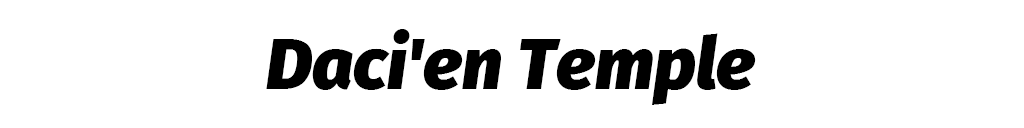
<style>
.page{position:relative;width:1024px;height:128px;background:#ffffff}
.page>*{position:absolute;margin:0}
.t1{font:71.8px "FiraSans-BlackItalic";color:#000000}
</style>
<div class="page">
<p class="t1" style="left:266px;top:29px;width:490px;height:76px">Daci'en Temple</p>
</div>
